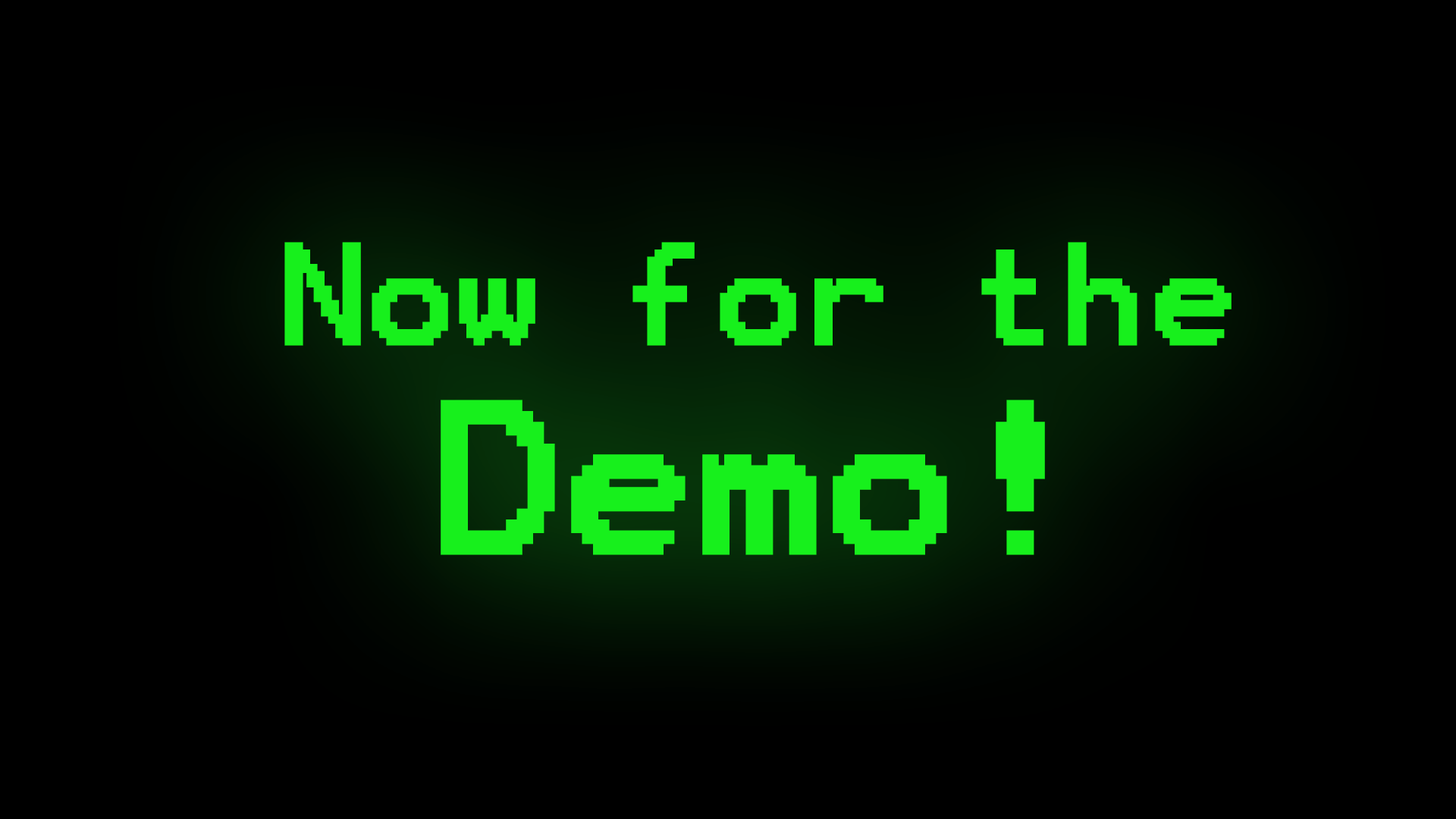
<style>
.page{position:relative;width:1456px;height:819px;background:#000000}
.page>*{position:absolute;margin:0}
.t1{font:115.8px "Terminal";color:#17f01c;font-weight:bold}
.t2{font:173.6px "Terminal";color:#17f01c;font-weight:bold}
</style>
<div class="page">
<p class="t1" style="left:284px;top:242px;width:948px;height:313px;text-align:center">Now for the <span class="t2">Demo!</span></p>
</div>
